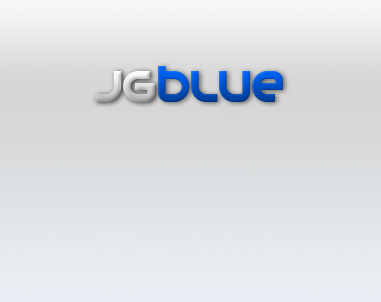
<style>
.page{position:relative;width:381px;height:302px}
.page>*{position:absolute;margin:0}
.t1{font:60px "PlanetMegapolis"}
</style>
<div class="page">
<p class="t1" style="left:158px;top:66px;width:125px;height:36px">blue</p>
</div>
